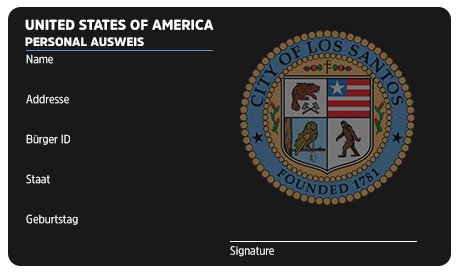
<style>
.page{position:relative;width:457px;height:272px;background:#191919}
.page>*{position:absolute;margin:0}
.t1{font:14px "AmsiPro-Black";color:#ffffff;text-transform:uppercase}
.t2{font:12px "AmsiPro-Black";color:#ffffff;text-transform:uppercase}
.t3{font:12px/40px "AmsiProNarw-Regular";color:#ffffff}
.t4{font:12px "AmsiProNarw-Regular";color:#ffffff}
</style>
<div class="page">
<p class="t1" style="left:25px;top:19px;width:189px;height:11px">United States of America</p>
<p class="t2" style="left:25px;top:37px;width:119px;height:10px">PERSONAL AUSWEIS</p>
<p class="t3" style="left:26px;top:54px;width:52px;height:171px">Name<br>Addresse<br>Bürger ID<br>Staat<br>Geburtstag</p>
<p class="t4" style="left:230px;top:246px;width:44px;height:11px">Signature</p>
</div>
